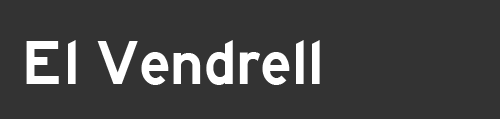
<style>
.page{position:relative;width:500px;height:119px;background:#333333}
.page>*{position:absolute;margin:0}
.t1{font:64px "HighwayGothicWide";color:#ffffff}
</style>
<div class="page">
<p class="t1" style="left:26px;top:40px;width:294px;height:45px">El Vendrell</p>
</div>
